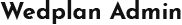
<style>
.page{position:relative;width:182px;height:25px;background:#ffffff}
.page>*{position:absolute;margin:0}
.t1{font:24px "JosefinSans-Bold";color:#121212}
</style>
<div class="page">
<p class="t1" style="left:0px;top:0px;width:181px;height:24px">Wedplan Admin</p>
</div>
